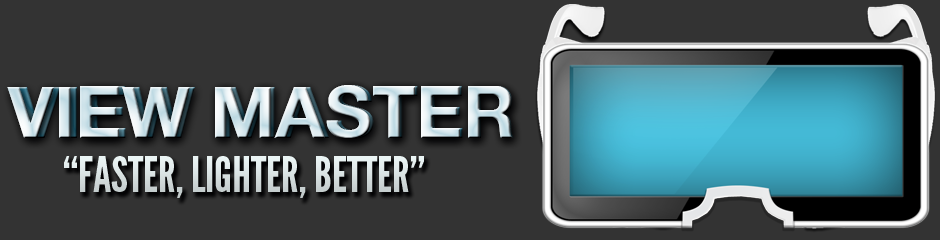
<style>
.page{position:relative;width:940px;height:240px;background:#333333}
.page>*{position:absolute;margin:0}
.t1{font:72.4px "HelveticaNeue-Bold"}
.t2{font:49px "LeagueGothic";color:#dbe4e4}
</style>
<div class="page">
<p class="t1" style="left:7px;top:85px;width:506px;height:54px">VIEW MASTER</p>
<p class="t1" style="left:7px;top:85px;width:506px;height:54px">VIEW MASTER</p>
<p class="t1" style="left:15px;top:85px;width:499px;height:54px">VIEW MASTER</p>
<p class="t2" style="left:64px;top:156px;width:360px;height:42px">“FASTER, LIGHTER, BETTER”</p>
</div>
